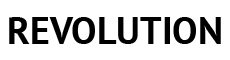
<style>
.page{position:relative;width:230px;height:60px;background:#ffffff}
.page>*{position:absolute;margin:0}
.t1{font:38px "PTSans-Bold";color:#000000}
</style>
<div class="page">
<p class="t1" style="left:9px;top:17px;width:212px;height:27px">REVOLUTION</p>
</div>
